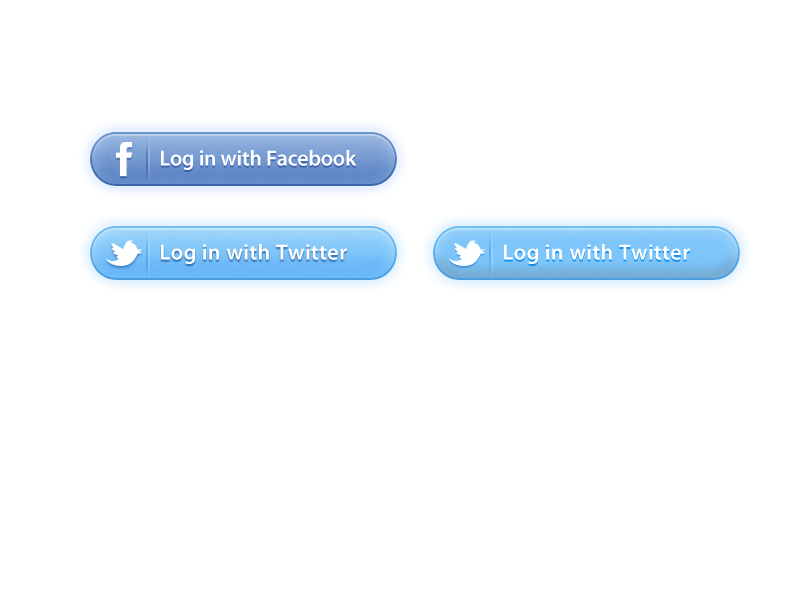
<style>
.page{position:relative;width:800px;height:600px;background:#ffffff}
.page>*{position:absolute;margin:0}
.t1{font:22px "MyriadPro-Semibold";letter-spacing:-0.01em;color:#ffffff}
.t2{font:22px "MyriadPro-Semibold";letter-spacing:0.02em;color:#ffffff}
</style>
<div class="page">
<p class="t1" style="left:161px;top:150px;width:196px;height:20px">Log in with Facebook</p>
<p class="t2" style="left:161px;top:244px;width:186px;height:20px">Log in with Twitter</p>
<p class="t2" style="left:504px;top:244px;width:186px;height:20px">Log in with Twitter</p>
</div>
